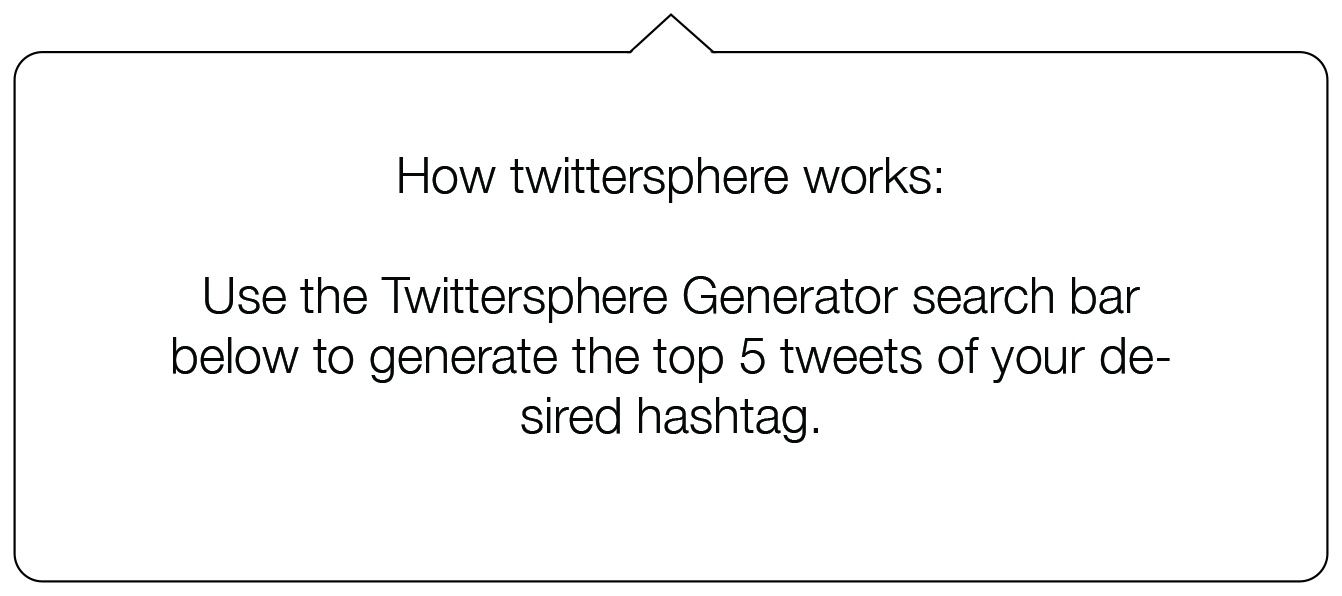
<style>
.page{position:relative;width:1342px;height:596px;background:#ffffff}
.page>*{position:absolute;margin:0}
.t1{font:50px "HelveticaNeue-Light";color:#060808}
</style>
<div class="page">
<p class="t1" style="left:173px;top:157px;width:997px;height:286px;text-align:center">How twittersphere works:<br><br>Use the Twittersphere Generator search bar below to generate the top 5 tweets of your desired hashtag.</p>
</div>
